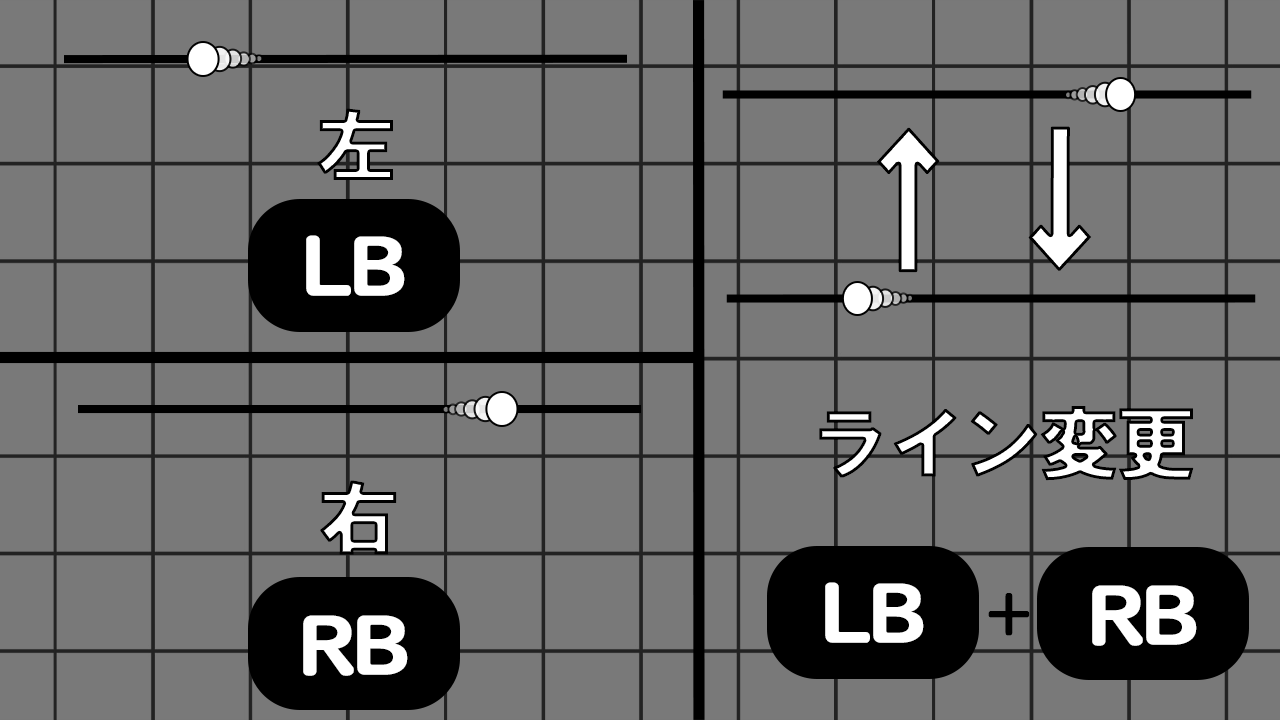
<style>
.page{position:relative;width:1280px;height:720px;background:#797979}
.page>*{position:absolute;margin:0}
.t1{font:36.9px "HGSSoeiKakugothicUB";letter-spacing:-0.07em;color:#ffffff;font-weight:bold;scale:0.9 1}
.t2{font:19.2px "UDDigiKyokashoNK-B";letter-spacing:-0.07em;color:#ffffff;font-weight:bold}
.t3{font:14.6px "UDDigiKyokashoNK-B";letter-spacing:-0.07em;color:#000000;font-weight:bold;scale:0.94 1}
</style>
<div class="page">
<p class="t1" style="left:1028px;top:126px;width:64px;height:145px;rotate:-180deg">↑</p>
<p class="t1" style="left:877px;top:127px;width:63px;height:146px;text-align:center">↑</p>
<p class="t2" style="left:306px;top:235px;width:99px;height:61px;text-align:center">LB</p>
<p class="t2" style="left:825px;top:582px;width:99px;height:61px;text-align:center">LB</p>
<p class="t3" style="left:988px;top:593px;width:42px;height:43px;text-align:center">+</p>
<p class="t2" style="left:1092px;top:585px;width:105px;height:61px;text-align:center">RB</p>
<p class="t2" style="left:303px;top:615px;width:105px;height:61px;text-align:center">RB</p>
</div>
